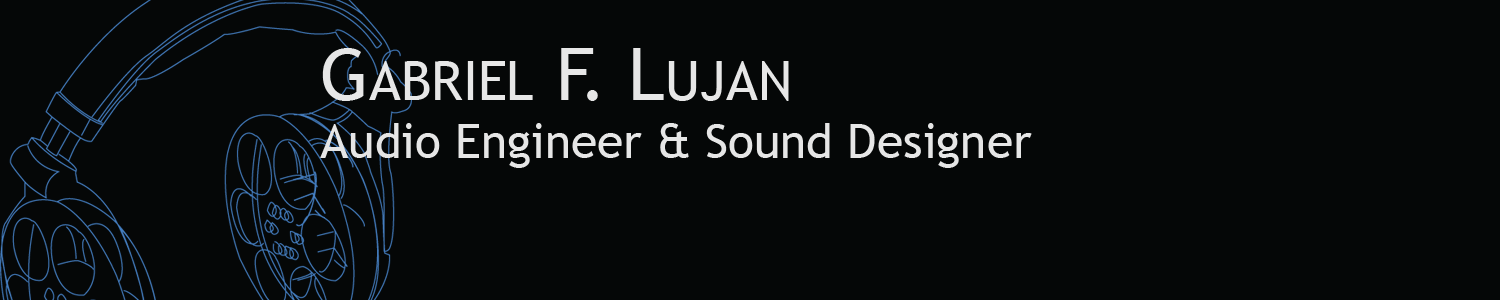
<style>
.page{position:relative;width:1500px;height:300px;background:#050707}
.page>*{position:absolute;margin:0}
.t1{font:54px "TrebuchetMS";color:#e7e7e7}
.t2{font:72px "TrebuchetMS";color:#e7e7e7}
.t3{font:48px "TrebuchetMS";color:#e6e6e6}
</style>
<div class="page">
<p class="t1" style="left:322px;top:48px;width:467px;height:53px"><span class="t2">G</span>ABRIEL<span class="t2"> F. L</span>UJAN</p>
<p class="t3" style="left:320px;top:123px;width:712px;height:45px">Audio Engineer &amp; Sound Designer</p>
</div>
